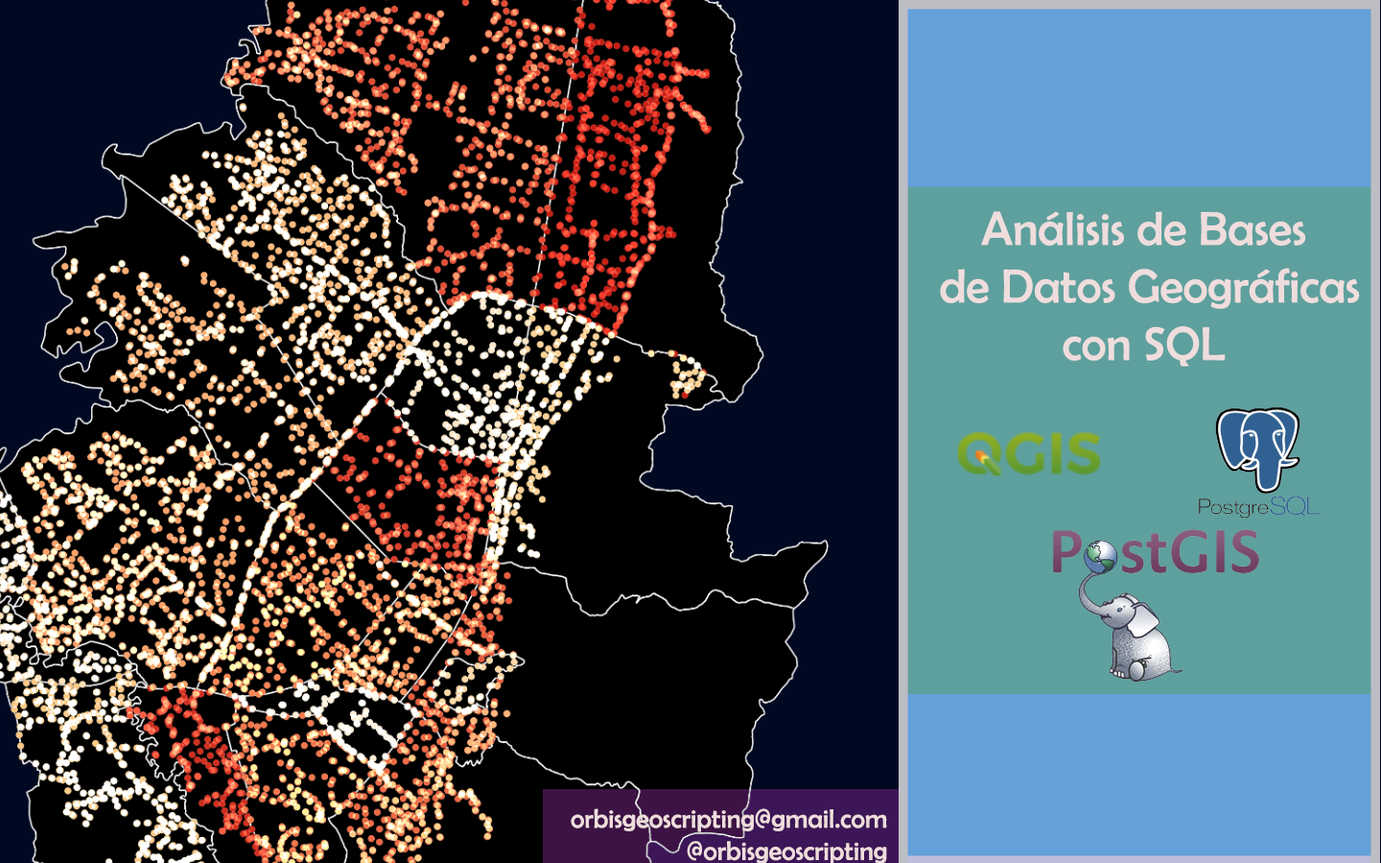
<style>
.page{position:relative;width:1381px;height:863px;background:#000000}
.page>*{position:absolute;margin:0}
.t1{font:48px "BerlinSansFB-Reg";color:#efdddd}
.t2{font:57.6px "BerlinSansFB-Reg";color:#030b27}
.t3{font:26.9px "BerlinSansFB-Reg";color:#efdddd}
</style>
<div class="page">
<p class="t1" style="left:940px;top:211px;width:420px;height:155px;text-align:center"><span class="t2"><br></span>Análisis de Bases<br> de Datos Geográficas<br>con SQL</p>
<p class="t3" style="left:571px;top:809px;width:316px;height:56px;text-align:right">orbisgeoscripting@gmail.com<br>@orbisgeoscripting</p>
</div>
